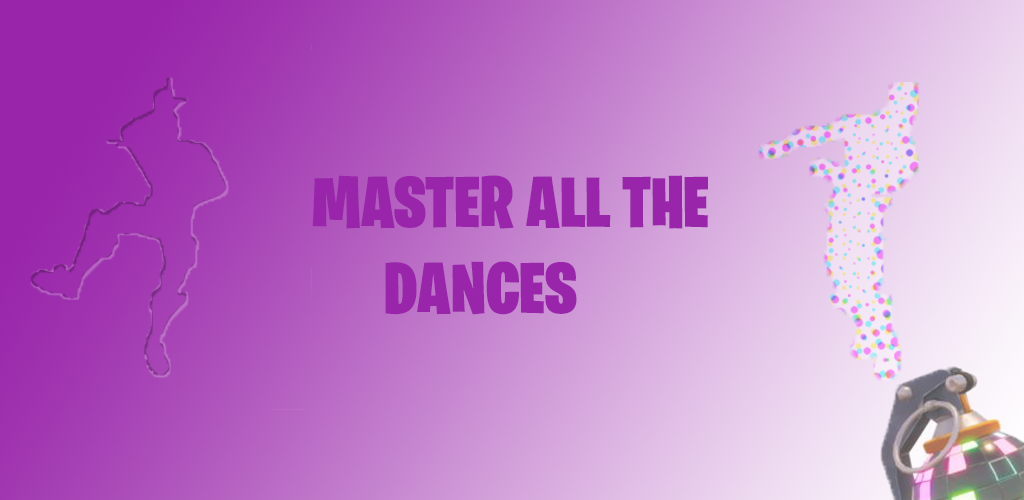
<style>
.page{position:relative;width:1024px;height:500px}
.page>*{position:absolute;margin:0}
.t1{font:72px "BurbankBigCondensed-Black";color:#9926aa}
.t2{font:97px "BurbankBigCondensed-Black";color:#9926aa}
</style>
<div class="page">
<p class="t1" style="left:312px;top:175px;width:396px;height:140px">MASTER ALL THE <br>  DANCES<br><span class="t2">   <br>DANCERS</span></p>
</div>
